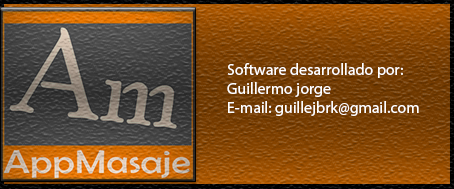
<style>
.page{position:relative;width:454px;height:189px}
.page>*{position:absolute;margin:0}
.t1{font:12px "MyriadPro-Regular";color:#ffffff}
</style>
<div class="page">
<p class="t1" style="left:227px;top:63px;width:192px;height:53px">Software desarrollado por: <br>Guillermo jorge<br>E-mail: guillejbrk@gmail.com</p>
</div>
